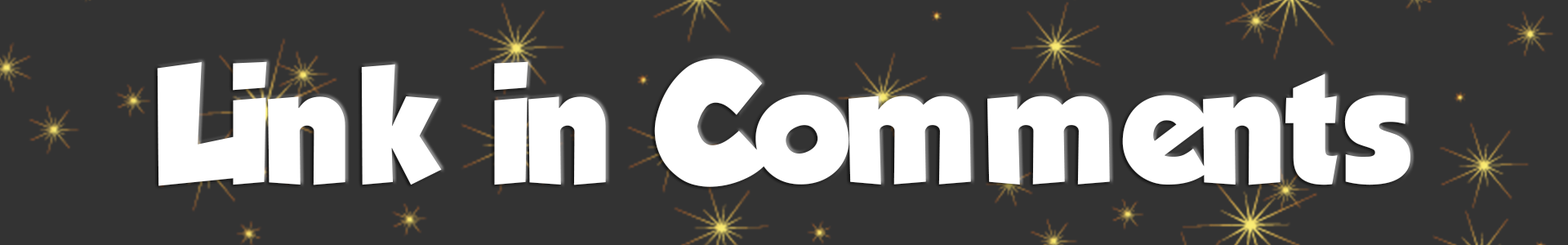
<style>
.page{position:relative;width:1568px;height:245px;background:#333333}
.page>*{position:absolute;margin:0}
.t1{font:181.3px "TadeoFont-Bold";color:#ffffff}
</style>
<div class="page">
<p class="t1" style="left:157px;top:58px;width:1253px;height:129px">Link in Comments</p>
</div>
